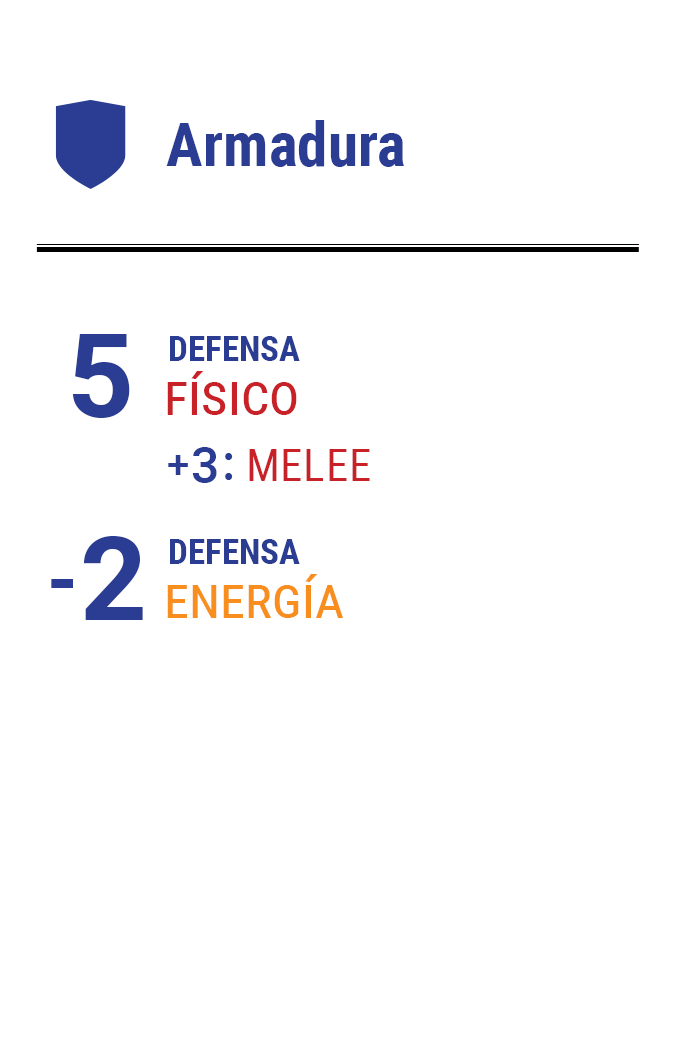
<style>
.page{position:relative;width:675px;height:1050px;background:#ffffff}
.page>*{position:absolute;margin:0}
.t1{font:61.2px "RobotoCondensed-Bold";color:#2a3d93}
.t2{font:116.7px "Roboto-Bold";letter-spacing:-0.16em;color:#2a3d93}
.t3{font:35px "RobotoCondensed-Bold";color:#2a3d93}
.t4{font:58.3px "RobotoCondensed-Regular";color:#c82127;font-variant:small-caps}
.t5{font:49.8px "Roboto-Medium";letter-spacing:-0.1em;color:#2a3d93}
.t6{font:39.7px "Roboto-Medium";letter-spacing:-0.1em;color:#2a3d93}
.t7{font:44.6px "RobotoCondensed-Regular";letter-spacing:0.02em;color:#c82127;text-transform:uppercase}
.t8{font:79.2px "Roboto-Bold";letter-spacing:-0.16em;color:#2a3d93}
.t9{font:58.3px "RobotoCondensed-Regular";color:#f78e1e;font-variant:small-caps}
</style>
<div class="page">
<p class="t1" style="left:166px;top:120px;width:238px;height:47px">Armadura</p>
<p class="t2" style="left:73px;top:334px;width:57px;height:84px">5</p>
<p class="t3" style="left:170px;top:336px;width:130px;height:25px">DEFENSA</p>
<p class="t4" style="left:167px;top:371px;width:130px;height:44px">físico</p>
<p class="t5" style="left:168px;top:447px;width:65px;height:36px"><span class="t6">+ </span>3 :</p>
<p class="t7" style="left:249px;top:449px;width:121px;height:32px">melee</p>
<p class="t8" style="left:51px;top:536px;width:92px;height:84px">-  <span class="t2">2</span></p>
<p class="t3" style="left:170px;top:539px;width:130px;height:25px">DEFENSA</p>
<p class="t9" style="left:167px;top:574px;width:177px;height:44px">energía</p>
</div>
